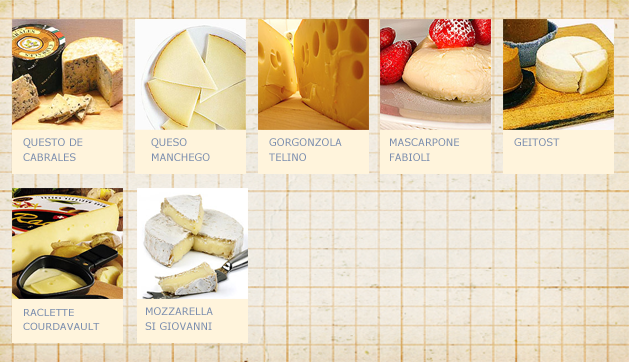
<style>
.page{position:relative;width:629px;height:362px}
.page>*{position:absolute;margin:0}
.t1{font:10.2px/15px "Verdana";color:#7a8dae}
.t2{font:10.2px "Verdana";color:#7a8dae}
.t3{font:9.4px/13.8px "Verdana";color:#7a8dae;scale:1.06 1}
</style>
<div class="page">
<p class="t1" style="left:23px;top:138px;width:60px;height:23px">QUESTO DE<br>CABRALES</p>
<p class="t1" style="left:151px;top:138px;width:59px;height:23px">QUESO <br>MANCHEGO</p>
<p class="t1" style="left:269px;top:138px;width:73px;height:23px">GORGONZOLA <br>TELINO</p>
<p class="t1" style="left:390px;top:138px;width:69px;height:23px">MASCARPONE <br>FABIOLI</p>
<p class="t2" style="left:514px;top:138px;width:46px;height:8px">GEITOST</p>
<p class="t3" style="left:23px;top:308px;width:77px;height:22px">RACLETTE <br>COURDAVAULT</p>
<p class="t1" style="left:145px;top:307px;width:68px;height:23px">MOZZARELLA <br>SI GIOVANNI</p>
</div>
